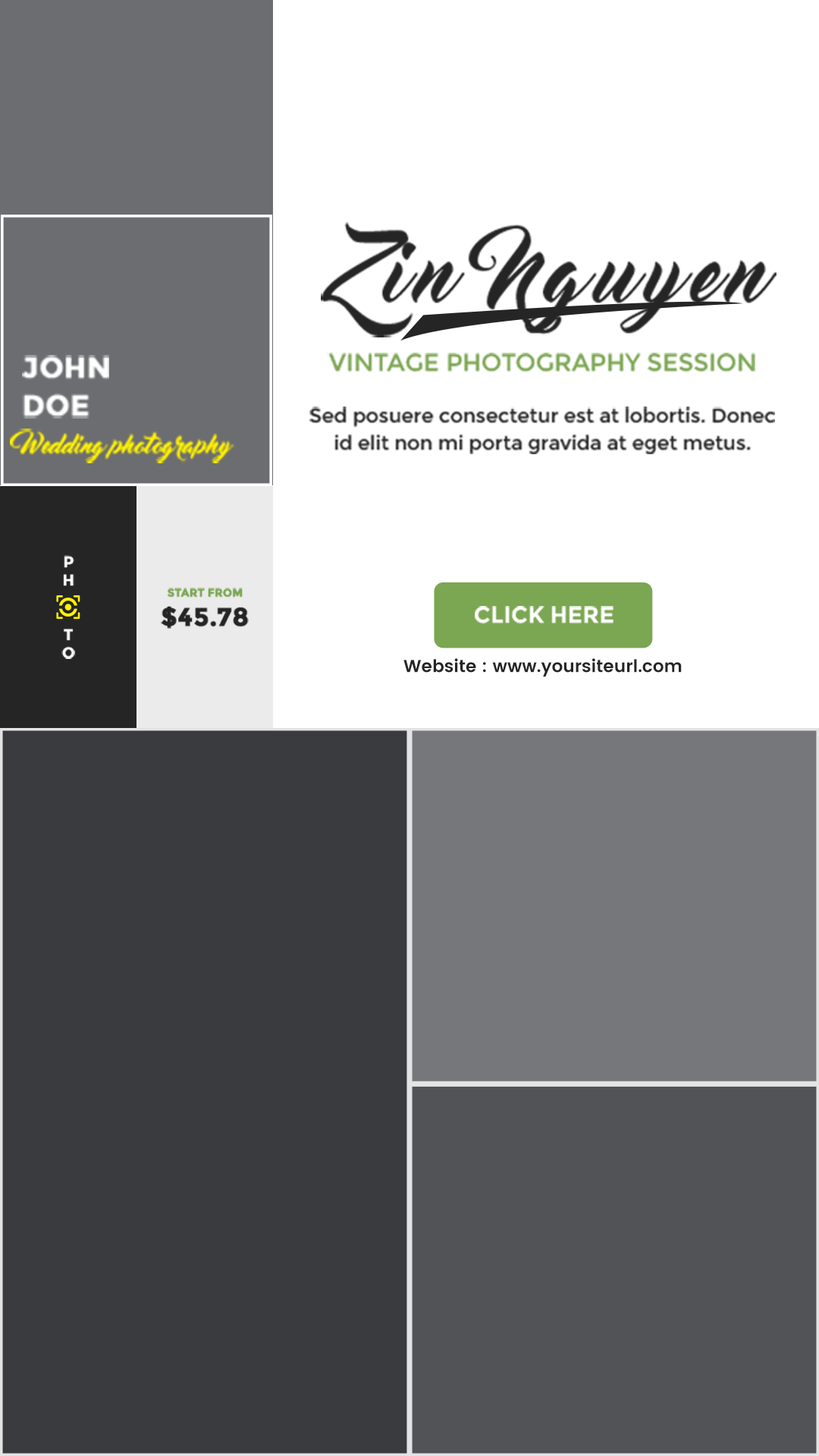
<style>
.page{position:relative;width:819px;height:1456px;background:#ffffff}
.page>*{position:absolute;margin:0}
.t1{font:81.8px "MasterOfBreak";letter-spacing:0.1em;color:#252525}
.t2{font:24.2px "Montserrat-Regular";color:#7ba652;text-transform:uppercase}
.t3{font:29px/38px "Montserrat-Bold";color:#ffffff;text-transform:uppercase;font-weight:bold}
.t4{font:19.7px/27.3px "Montserrat-Regular";color:#252525}
.t5{font:23.5px "MasterOfBreak";color:#fff200}
.t6{font:15.5px/18.2px "Montserrat-Bold";color:#ffffff;text-transform:uppercase;font-weight:bold}
.t7{font:10.9px/29.1px "Montserrat-Bold";color:#7ba652;text-transform:uppercase;font-weight:bold}
.t8{font:25.5px/29.1px "Montserrat-Bold";color:#252525;text-transform:uppercase;font-weight:bold}
.t9{font:22.9px "Montserrat-Bold";color:#ffffff;text-transform:uppercase}
.t10{font:17.5px "Poppins-SemiBold";color:#252525}
</style>
<div class="page">
<p class="t1" style="left:321px;top:222px;width:456px;height:115px">Zin Nguyen</p>
<p class="t2" style="left:327px;top:353px;width:428px;height:19px">vintage photography session</p>
<p class="t3" style="left:22px;top:355px;width:87px;height:64px">john<br>doe</p>
<p class="t4" style="left:309px;top:406px;width:466px;height:48px;text-align:center">Sed posuere consectetur est at lobortis. Donec id elit non mi porta gravida at eget metus.</p>
<p class="t5" style="left:10px;top:428px;width:224px;height:35px">Wedding photography</p>
<p class="t6" style="left:61px;top:555px;width:14px;height:104px;text-align:center">p<br>h<br><br><br>t<br>o</p>
<p class="t7" style="left:161px;top:588px;width:88px;height:41px;text-align:center">start from<br><span class="t8">$45.78</span></p>
<p class="t9" style="left:475px;top:606px;width:138px;height:18px">click here</p>
<p class="t10" style="left:403px;top:658px;width:279px;height:19px">Website : www.yoursiteurl.com</p>
</div>
